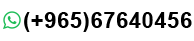
<style>
.page{position:relative;width:194px;height:41px;background:#ffffff}
.page>*{position:absolute;margin:0}
.t1{font:22px "Arial-BoldMT";letter-spacing:0.025em;color:#000000}
</style>
<div class="page">
<p class="t1" style="left:24px;top:12px;width:168px;height:20px">(+965)67640456</p>
</div>
